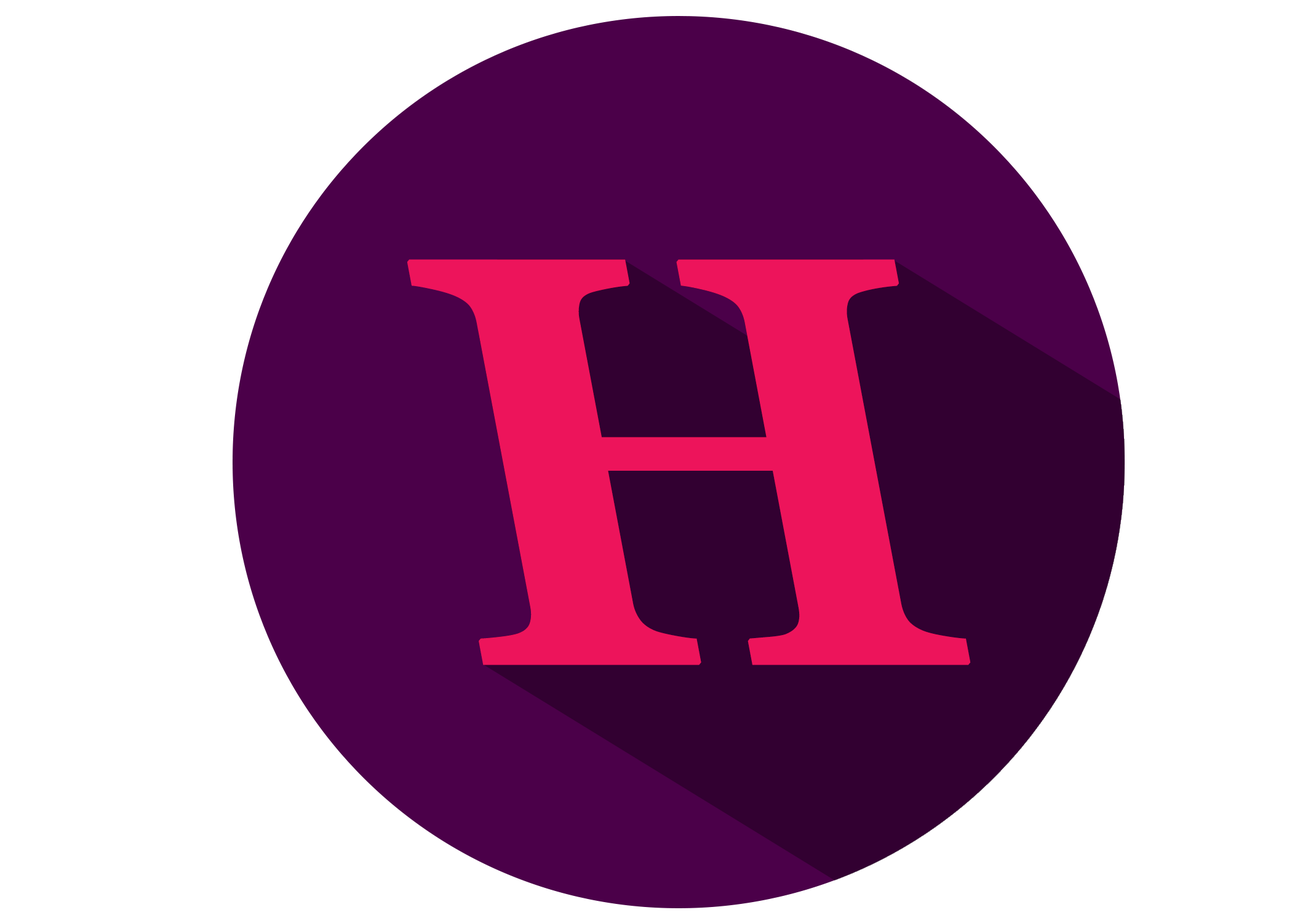
<style>
.page{position:relative;width:1292px;height:923px;background:#ffffff}
.page>*{position:absolute;margin:0}
.t1{font:588.9px "Georgia-Bold";color:#ed145b;font-weight:bold}
</style>
<div class="page">
<p class="t1" style="left:407px;top:259px;width:564px;height:406px">H</p>
</div>
